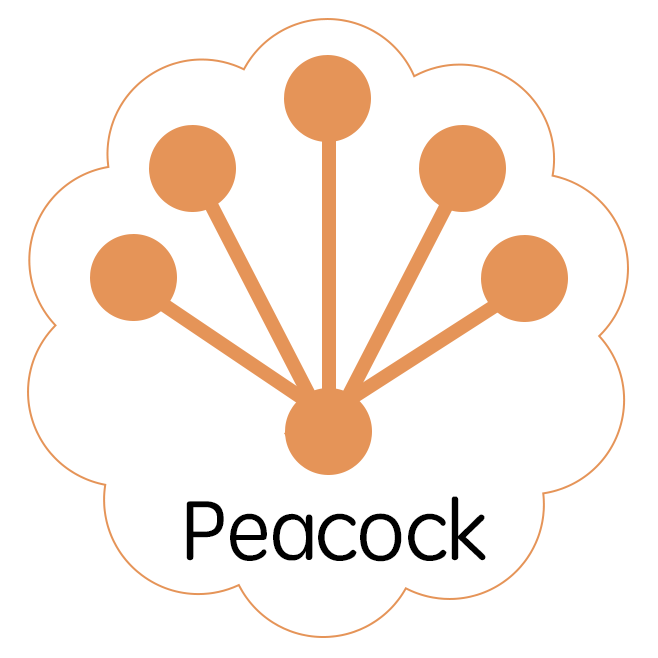
<style>
.page{position:relative;width:658px;height:658px;background:#ffffff}
.page>*{position:absolute;margin:0}
.t1{font:85px "STYuanti-TC-Regular";color:#000000}
</style>
<div class="page">
<p class="t1" style="left:186px;top:496px;width:300px;height:66px">Peacock</p>
</div>
